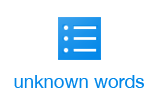
<style>
.page{position:relative;width:160px;height:98px;background:#ffffff}
.page>*{position:absolute;margin:0}
.t1{font:18.5px "HelveticaNeue";color:#0086e8}
</style>
<div class="page">
<p class="t1" style="left:14px;top:75px;width:130px;height:13px">unknown words</p>
</div>
